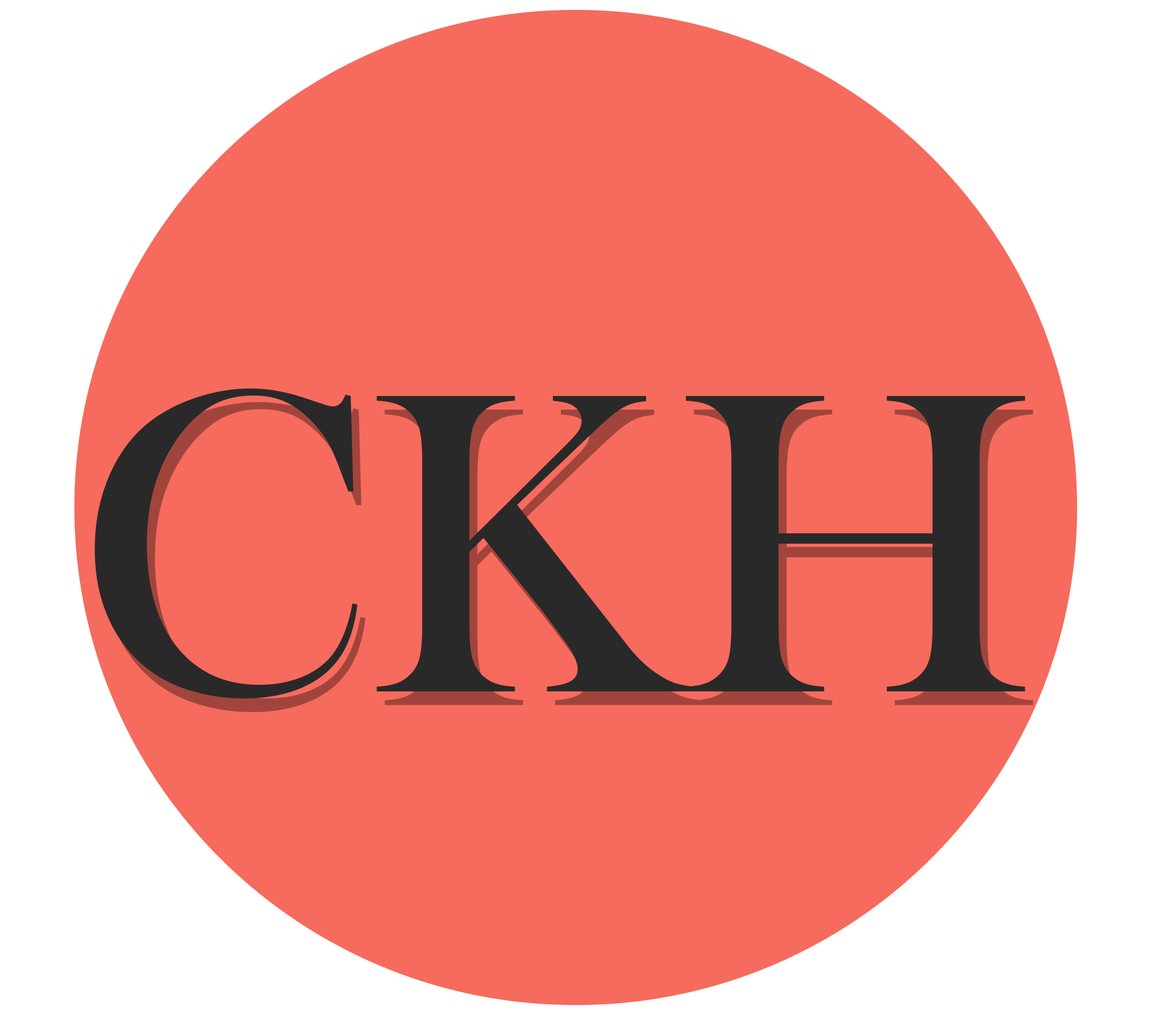
<style>
.page{position:relative;width:1167px;height:1022px;background:#f66b5d}
.page>*{position:absolute;margin:0}
.t1{font:443px "BaskOldFace";letter-spacing:-0.01em;color:#2a2929}
</style>
<div class="page">
<p class="t1" style="left:95px;top:388px;width:930px;height:311px">CKH</p>
</div>
